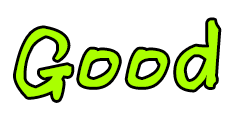
<style>
.page{position:relative;width:234px;height:128px;background:#ffffff}
.page>*{position:absolute;margin:0}
.t1{font:120px "SentyMARUKO";color:#aaff00}
</style>
<div class="page">
<p class="t1" style="left:16px;top:20px;width:203px;height:80px">Good</p>
</div>
